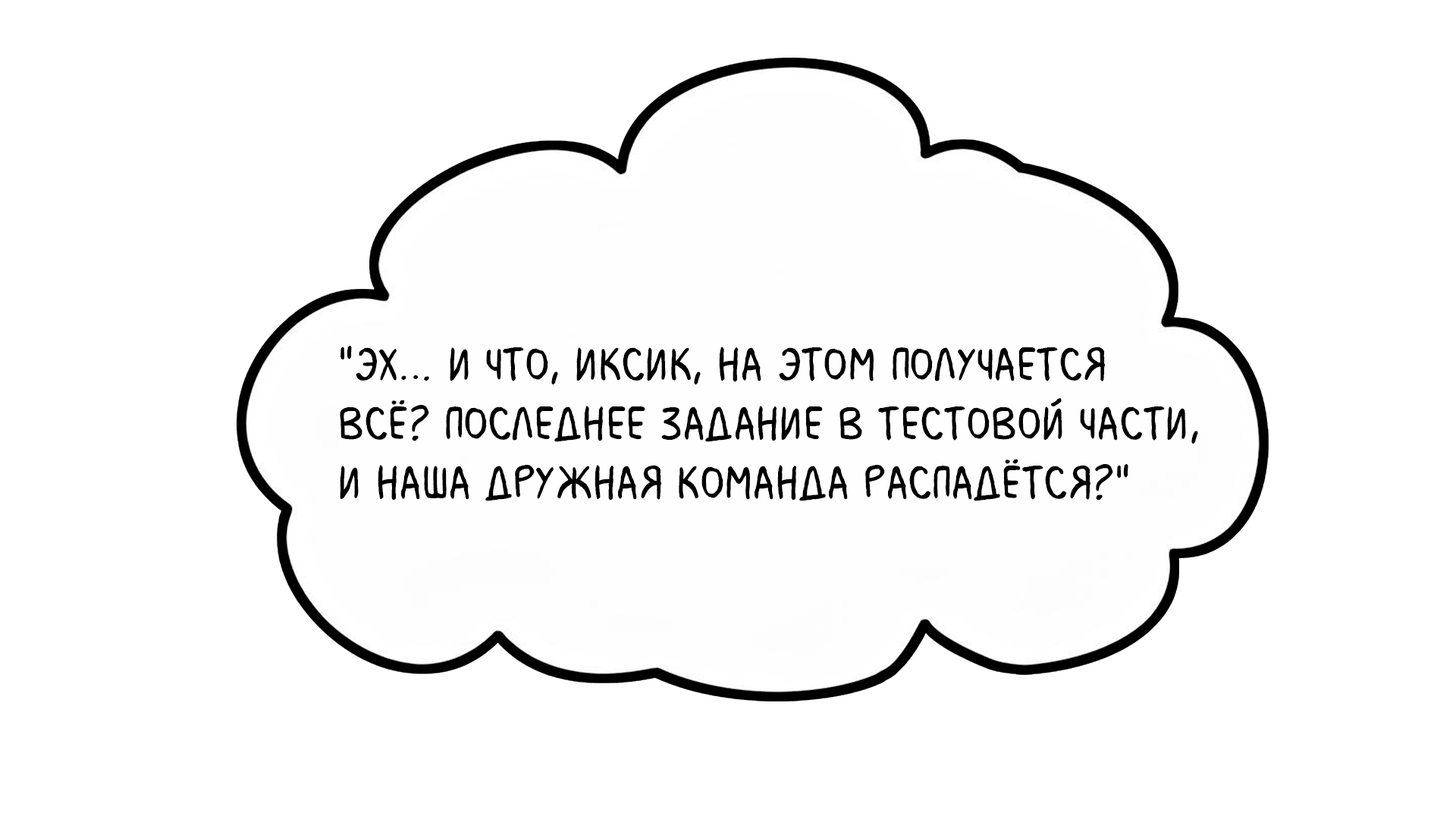
<style>
.page{position:relative;width:1456px;height:819px;background:#ffffff}
.page>*{position:absolute;margin:0}
.t1{font:49.3px "MilkMustacheBB";color:#000000}
</style>
<div class="page">
<p class="t1" style="left:340px;top:346px;width:858px;height:155px">"Эх… И что, Иксик, на этом получается <br>всё? Последнее задание в тестовой части, <br>и наша дружная команда распадётся?"</p>
</div>
